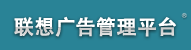
<style>
.page{position:relative;width:191px;height:50px;background:#298396}
.page>*{position:absolute;margin:0}
.t1{font:20px "AdobeHeitiStd-Regular";color:#f7f7f7;font-weight:bold}
</style>
<div class="page">
<p class="t1" style="left:14px;top:16px;width:162px;height:21px">联想广告管理平台</p>
</div>
